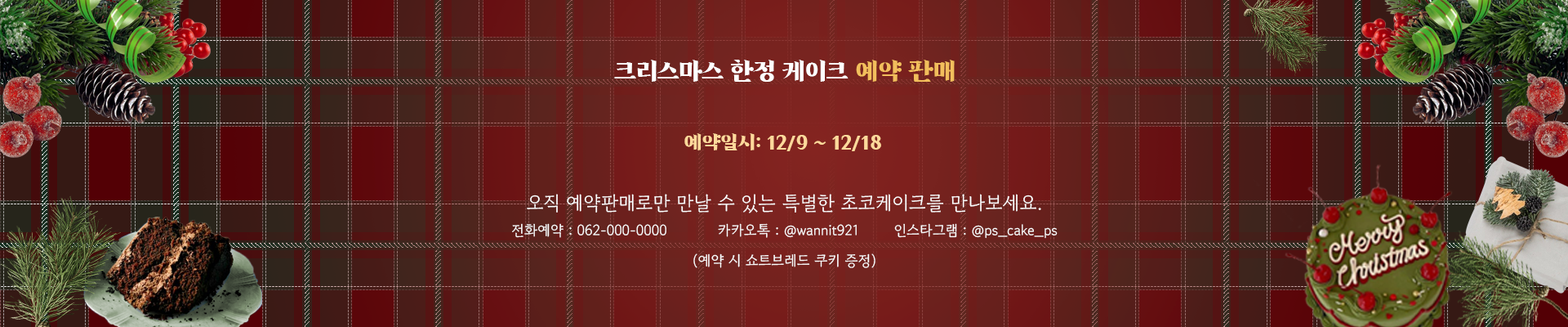
<style>
.page{position:relative;width:1568px;height:327px}
.page>*{position:absolute;margin:0}
.t1{font:24.5px "HSBomBaram3.0Regular";color:#ffffff}
.t2{font:24.5px "HSBomBaram3.0Regular";color:#f2be5c}
.t3{font:19.7px "HSBomBaram3.0Regular";color:#ffd99b}
.t4{font:14.7px/30.2px "GowunDodum-Regular";color:#ffffff}
.t5{font:19.6px/30.2px "GowunDodum-Regular";color:#ffffff}
</style>
<div class="page">
<p class="t1" style="left:614px;top:60px;width:341px;height:22px">크리스마스 한정 케이크 <span class="t2">예약 판매</span></p>
<p class="t3" style="left:684px;top:133px;width:197px;height:18px">예약일시: 12/9 ~ 12/18</p>
<p class="t4" style="left:512px;top:194px;width:546px;height:74px;text-align:center"><span class="t5">오직 예약판매로만 만날 수 있는 특별한 초코케이크를 만나보세요.<br></span>전화예약 : 062-000-0000  카카오톡 : @wannit921  인스타그램 : @ps_cake_ps<br>(예약 시 쇼트브레드 쿠키 증정)</p>
</div>
